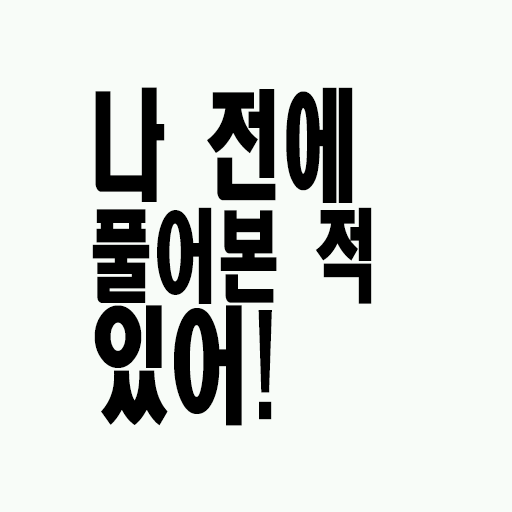
<style>
.page{position:relative;width:512px;height:512px;background:#f8fcf8}
.page>*{position:absolute;margin:0}
.t1{font:100px/110px "HeadlineR-HM";color:#000000;scale:0.64 1}
.t2{font:120px/110px "HeadlineR-HM";color:#000000;scale:0.64 1}
.t3{font:125px/110px "HeadlineR-HM";color:#000000;scale:0.64 1}
</style>
<div class="page">
<p class="t1" style="left:92px;top:87px;width:280px;height:339px"><span class="t2">나 전에<br></span>풀어본 적<br><span class="t3">있어!</span></p>
</div>
